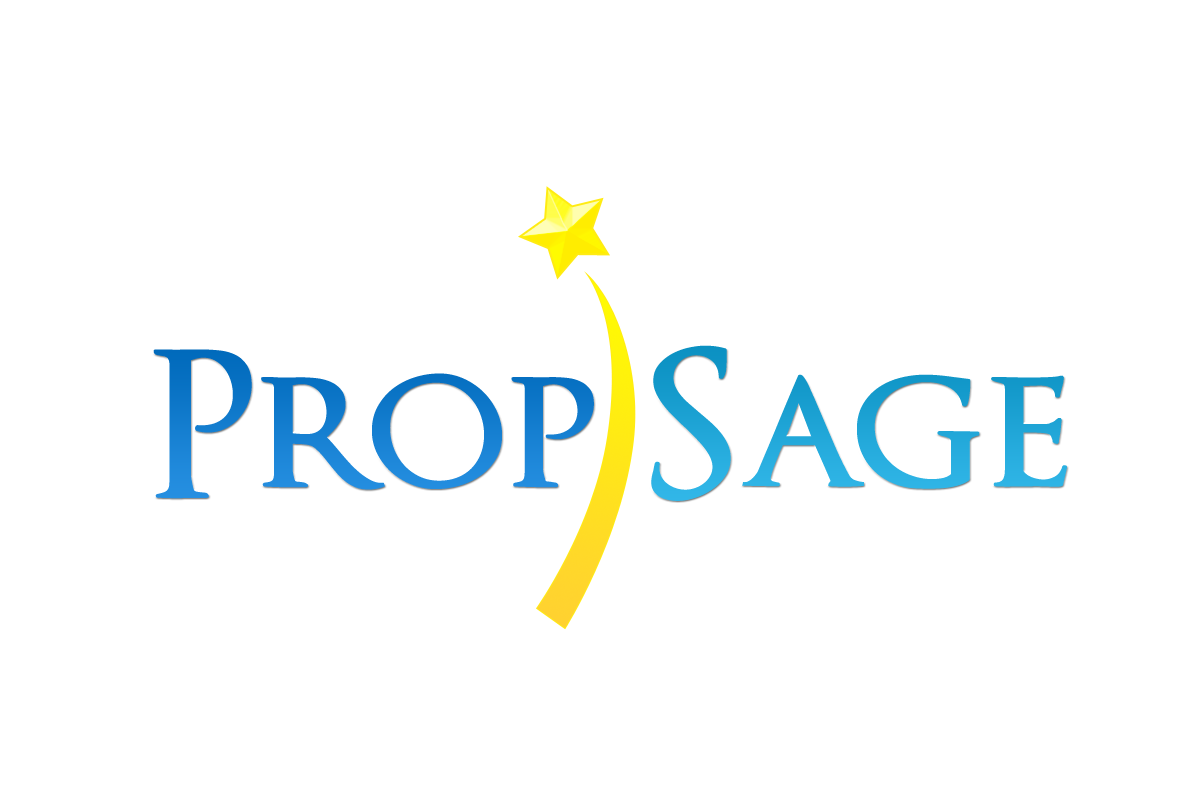
<style>
.page{position:relative;width:1200px;height:800px;background:#ffffff}
.page>*{position:absolute;margin:0}
.t1{font:200px "OptimusPrincepsSemiBold"}
</style>
<div class="page">
<p class="t1" style="left:153px;top:345px;width:914px;height:156px">Prop Sage</p>
</div>
